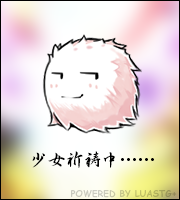
<style>
.page{position:relative;width:180px;height:200px}
.page>*{position:absolute;margin:0}
.t1{font:18px "DFGyoSho-W7-WING-RKSJ-H";color:#000000}
.t2{font:9px "ComicSansMS-Bold"}
</style>
<div class="page">
<p class="t1" style="left:32px;top:151px;width:122px;height:17px">少女祈祷中……</p>
<p class="t2" style="left:71px;top:190px;width:106px;height:8px">POWERED BY LUASTG+</p>
</div>
